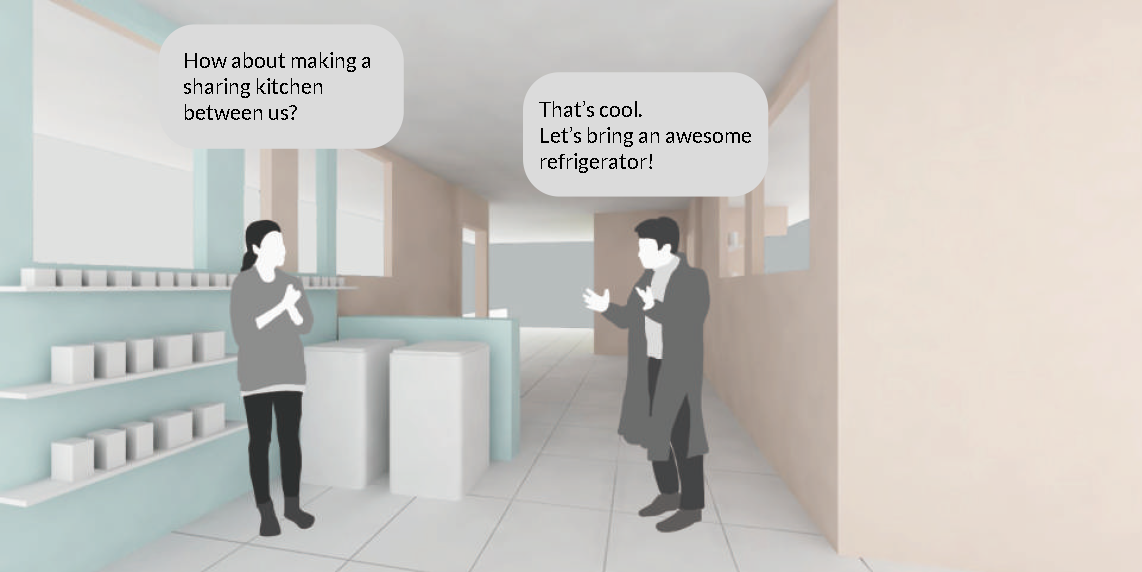
<style>
.page{position:relative;width:1142px;height:572px}
.page>*{position:absolute;margin:0}
.t1{font:21.3px "Lato-Regular";color:#000000}
</style>
<div class="page">
<p class="t1" style="left:184px;top:52px;width:186px;height:68px">How about making a <br>sharing kitchen<br>between us?</p>
<p class="t1" style="left:539px;top:101px;width:212px;height:72px">That’s cool.<br>Let’s bring an awesome<br>refrigerator!</p>
</div>
